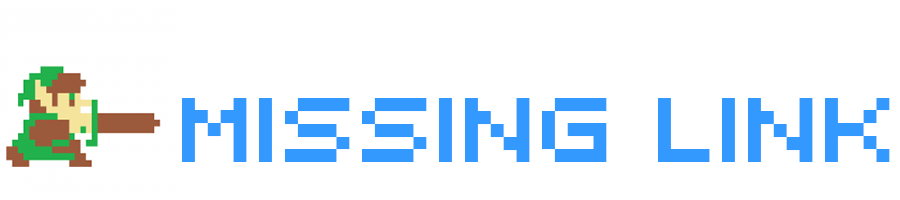
<style>
.page{position:relative;width:900px;height:200px;background:#ffffff}
.page>*{position:absolute;margin:0}
.t1{font:102.9px "automat";color:#3399ff}
</style>
<div class="page">
<p class="t1" style="left:182px;top:98px;width:708px;height:64px">missing link</p>
</div>
